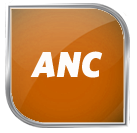
<style>
.page{position:relative;width:137px;height:133px}
.page>*{position:absolute;margin:0}
.t1{font:36px "Whitney-BlackItalicSC";color:#fbfcfd}
</style>
<div class="page">
<p class="t1" style="left:30px;top:51px;width:73px;height:27px">ANC</p>
</div>
